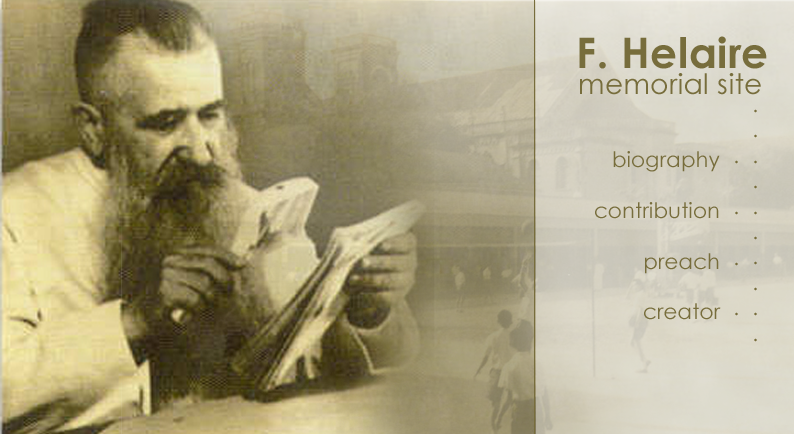
<style>
.page{position:relative;width:794px;height:434px}
.page>*{position:absolute;margin:0}
.t1{font:42.3px "CenturyGothic-Bold";letter-spacing:0.01em;color:#776d3c}
.t2{font:28.2px "CenturyGothic";letter-spacing:0.01em;color:#776d3c}
.t3{font:21.2px "CenturyGothic";letter-spacing:0.01em;color:#776d3c}
</style>
<div class="page">
<p class="t1" style="left:579px;top:36px;width:188px;height:33px">F. Helaire</p>
<p class="t2" style="left:580px;top:73px;width:181px;height:22px">memorial site</p>
<p class="t3" style="left:754px;top:109px;width:3px;height:233px;text-align:right">.<br>.<br>.<br>.<br>.<br>.<br>.<br>.<br>.<br>.</p>
<p class="t3" style="left:595px;top:151px;width:126px;height:169px;text-align:right">biography<br><br>contribution<br><br>preach<br><br>creator</p>
<p class="t3" style="left:735px;top:160px;width:3px;height:156px;text-align:right">.<br><br>.<br><br>.<br><br>.</p>
</div>
